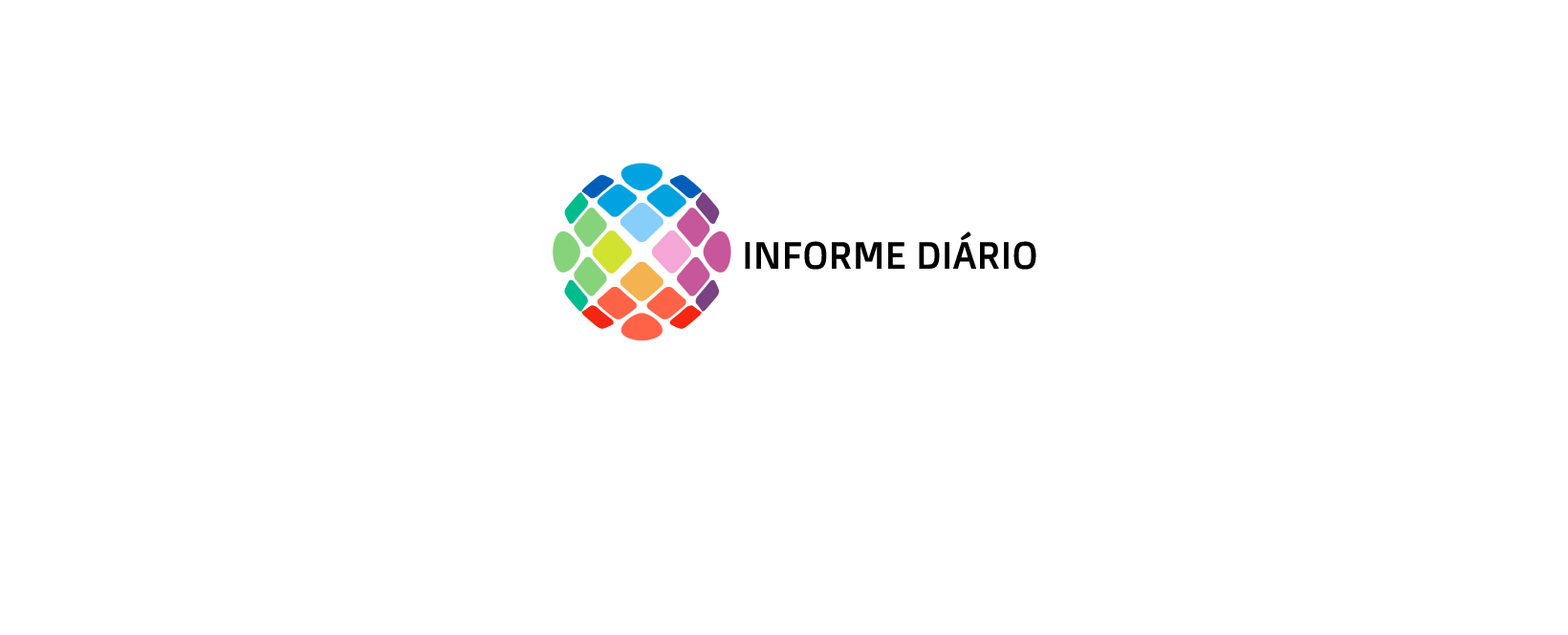
<style>
.page{position:relative;width:1568px;height:635px;background:#ffffff}
.page>*{position:absolute;margin:0}
.t1{font:38.2px "DoppioOne-Regular";color:#000000}
</style>
<div class="page">
<p class="t1" style="left:745px;top:231px;width:291px;height:39px">INFORME DIÁRIO</p>
</div>
